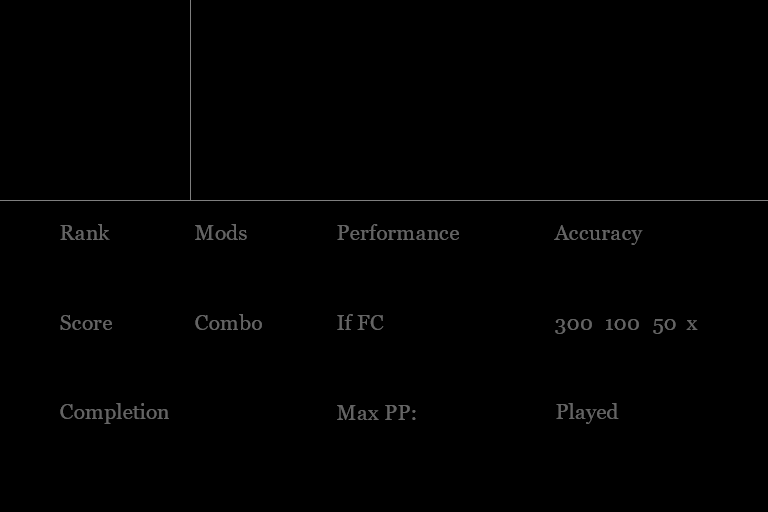
<style>
.page{position:relative;width:768px;height:512px;background:#000000}
.page>*{position:absolute;margin:0}
.t1{font:21.3px "Georgia";color:#646464}
</style>
<div class="page">
<p class="t1" style="left:60px;top:224px;width:50px;height:16px">Rank</p>
<p class="t1" style="left:195px;top:224px;width:52px;height:16px">Mods</p>
<p class="t1" style="left:337px;top:224px;width:122px;height:16px">Performance</p>
<p class="t1" style="left:554px;top:225px;width:89px;height:20px">Accuracy</p>
<p class="t1" style="left:60px;top:315px;width:52px;height:15px">Score</p>
<p class="t1" style="left:195px;top:314px;width:67px;height:16px">Combo</p>
<p class="t1" style="left:337px;top:314px;width:47px;height:16px">If FC</p>
<p class="t1" style="left:555px;top:319px;width:37px;height:15px">300</p>
<p class="t1" style="left:606px;top:319px;width:33px;height:11px">100</p>
<p class="t1" style="left:653px;top:319px;width:23px;height:15px">50</p>
<p class="t1" style="left:686px;top:320px;width:12px;height:10px">x</p>
<p class="t1" style="left:60px;top:403px;width:109px;height:21px">Completion</p>
<p class="t1" style="left:337px;top:405px;width:79px;height:15px">Max PP:</p>
<p class="t1" style="left:556px;top:403px;width:63px;height:21px">Played</p>
</div>
